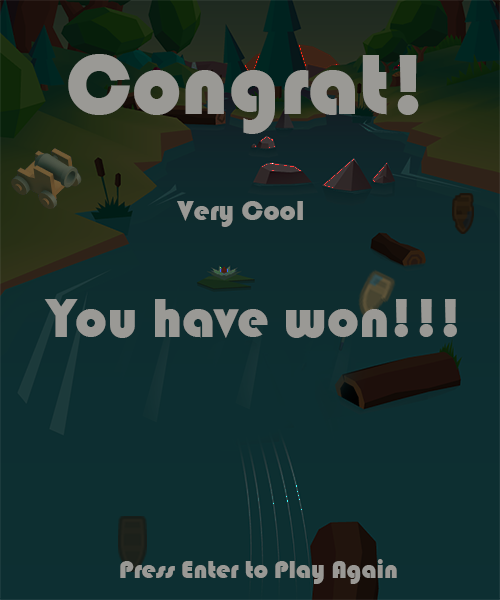
<style>
.page{position:relative;width:500px;height:600px}
.page>*{position:absolute;margin:0}
.t1{font:88.2px "Bauhaus93";color:#9a9995}
.t2{font:29.1px "Bauhaus93";color:#9a9995}
.t3{font:56.7px "Bauhaus93";color:#9a9995}
.t4{font:25.7px "Bauhaus93";color:#9a9995}
</style>
<div class="page">
<p class="t1" style="left:68px;top:54px;width:351px;height:80px">Congrat!</p>
<p class="t2" style="left:177px;top:201px;width:126px;height:26px">Very Cool</p>
<p class="t3" style="left:44px;top:299px;width:413px;height:39px">You have won!!!</p>
<p class="t4" style="left:120px;top:559px;width:277px;height:25px">Press Enter to Play Again</p>
</div>
